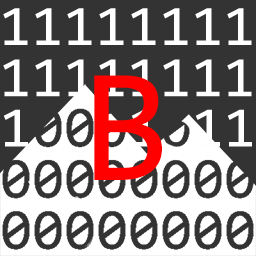
<style>
.page{position:relative;width:256px;height:256px;background:#333333}
.page>*{position:absolute;margin:0}
.t1{font:57.6px "Consolas";letter-spacing:0.01em;color:#ffffff}
.t2{font:57.6px "Consolas";letter-spacing:0.01em}
.t3{font:163.2px "Consolas";letter-spacing:0.01em;color:#ff0000}
.t4{font:57.6px "Consolas";letter-spacing:0.01em;color:#fffefe}
</style>
<div class="page">
<p class="t1" style="left:3px;top:8px;width:25px;height:37px">1</p>
<p class="t1" style="left:35px;top:8px;width:25px;height:37px">1</p>
<p class="t1" style="left:67px;top:8px;width:25px;height:37px">1</p>
<p class="t1" style="left:99px;top:8px;width:25px;height:37px">1</p>
<p class="t1" style="left:131px;top:8px;width:25px;height:37px">1</p>
<p class="t1" style="left:163px;top:8px;width:25px;height:37px">1</p>
<p class="t1" style="left:195px;top:8px;width:25px;height:37px">1</p>
<p class="t1" style="left:227px;top:8px;width:25px;height:37px">1</p>
<p class="t1" style="left:3px;top:59px;width:25px;height:38px">1</p>
<p class="t1" style="left:35px;top:59px;width:25px;height:38px">1</p>
<p class="t1" style="left:67px;top:59px;width:25px;height:38px">1</p>
<p class="t1" style="left:99px;top:59px;width:25px;height:38px">1</p>
<p class="t2" style="left:131px;top:59px;width:25px;height:38px">1</p>
<p class="t1" style="left:163px;top:59px;width:25px;height:38px">1</p>
<p class="t1" style="left:195px;top:59px;width:25px;height:38px">1</p>
<p class="t1" style="left:227px;top:59px;width:25px;height:38px">1</p>
<p class="t3" style="left:94px;top:75px;width:68px;height:105px">B</p>
<p class="t4" style="left:3px;top:109px;width:25px;height:38px">1</p>
<p class="t2" style="left:131px;top:109px;width:25px;height:38px">1</p>
<p class="t4" style="left:195px;top:109px;width:25px;height:38px">1</p>
<p class="t4" style="left:227px;top:109px;width:25px;height:38px">1</p>
</div>
